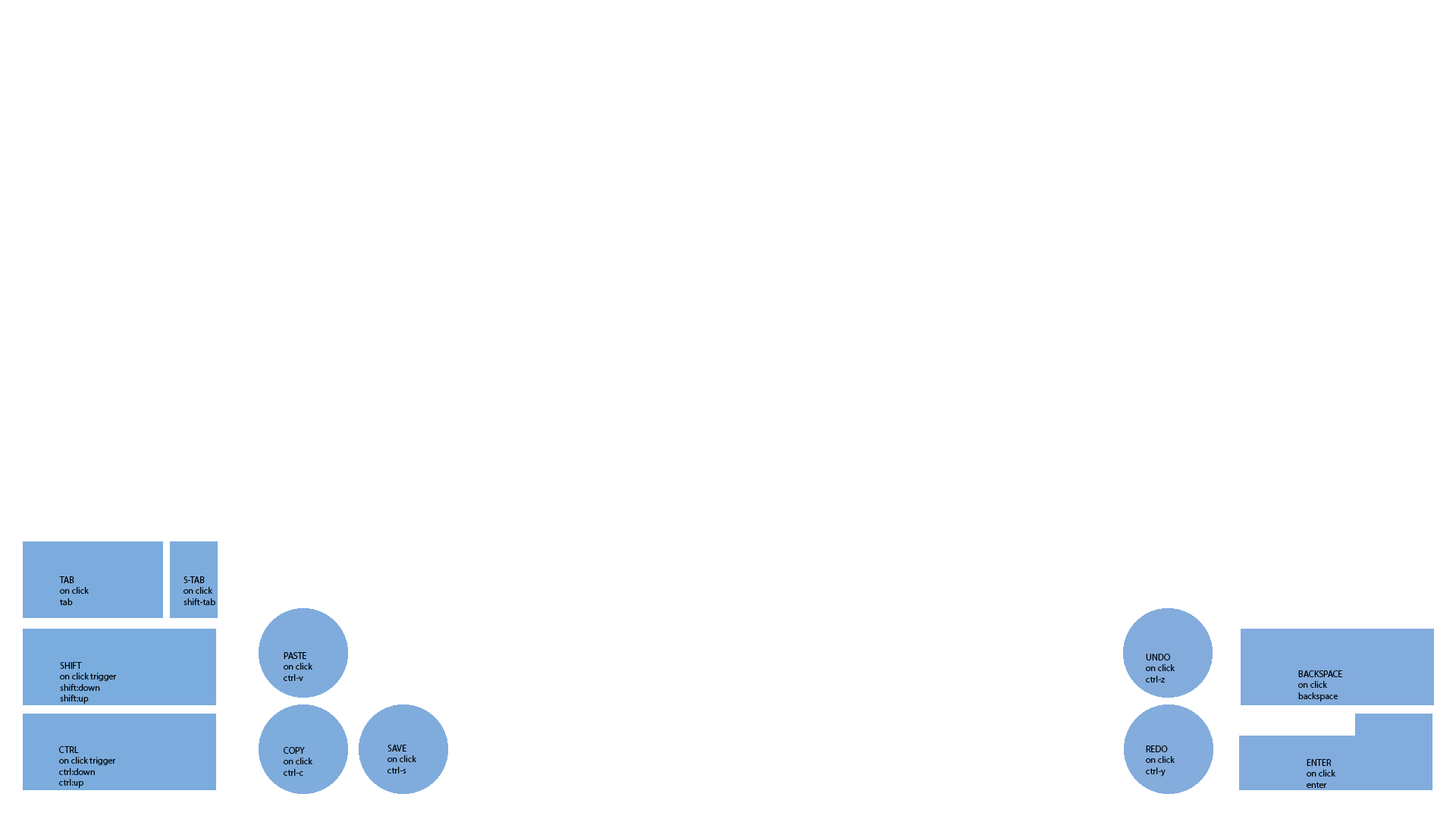
<style>
.page{position:relative;width:1456px;height:819px;background:#ffffff}
.page>*{position:absolute;margin:0}
.t1{font:9.1px "MyriadPro-Regular";color:#000000}
</style>
<div class="page">
<p class="t1" style="left:59px;top:576px;width:30px;height:29px">TAB<br>on click<br>tab</p>
<p class="t1" style="left:184px;top:576px;width:31px;height:29px">S-TAB<br>on click<br>shift-tab</p>
<p class="t1" style="left:284px;top:652px;width:28px;height:29px">PASTE<br>on click<br>ctrl-v</p>
<p class="t1" style="left:1146px;top:654px;width:29px;height:28px">UNDO<br>on click<br>ctrl-z</p>
<p class="t1" style="left:60px;top:662px;width:57px;height:42px">SHIFT<br>on click trigger<br>shift:down<br>shift:up</p>
<p class="t1" style="left:1298px;top:670px;width:44px;height:31px">BACKSPACE<br>on click<br>backspace</p>
<p class="t1" style="left:59px;top:746px;width:57px;height:42px">CTRL<br>on click trigger<br>ctrl:down<br>ctrl:up</p>
<p class="t1" style="left:284px;top:747px;width:28px;height:29px">COPY<br>on click<br>ctrl-c</p>
<p class="t1" style="left:388px;top:745px;width:28px;height:28px">SAVE<br>on click<br>ctrl-s</p>
<p class="t1" style="left:1146px;top:745px;width:29px;height:32px">REDO<br>on click<br>ctrl-y</p>
<p class="t1" style="left:1307px;top:759px;width:28px;height:29px">ENTER<br>on click<br>enter</p>
</div>
